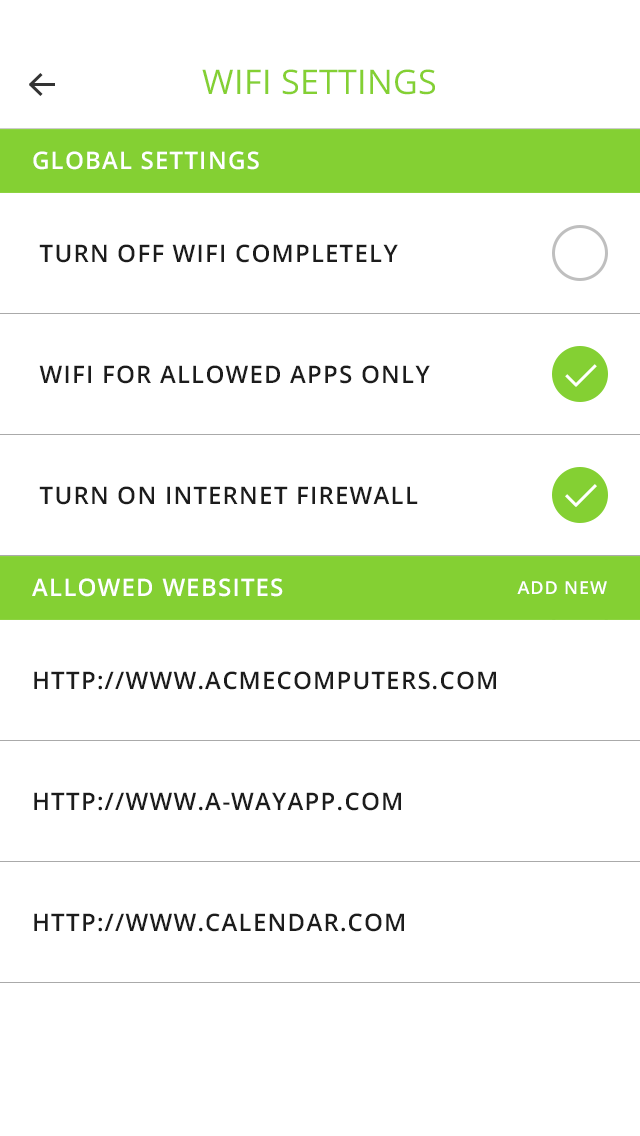
<style>
.page{position:relative;width:640px;height:1136px;background:#ffffff}
.page>*{position:absolute;margin:0}
.t1{font:34px "OpenSans";letter-spacing:0.01em;color:#84d033;text-transform:uppercase}
.t2{font:24px "OpenSans-Semibold";letter-spacing:0.05em;color:#ffffff;text-transform:uppercase}
.t3{font:24px "OpenSans-Semibold";letter-spacing:0.05em;color:#1c1c1c;text-transform:uppercase}
.t4{font:18px "OpenSans-Semibold";letter-spacing:0.05em;color:#ffffff;text-transform:uppercase}
</style>
<div class="page">
<p class="t1" style="left:202px;top:69px;width:233px;height:26px">WIFI SETTINGS</p>
<p class="t2" style="left:33px;top:151px;width:226px;height:19px">GLOBAL SETTINGS</p>
<p class="t3" style="left:39px;top:244px;width:359px;height:19px">TURN OFF WIFI COMPLETELY</p>
<p class="t3" style="left:39px;top:365px;width:391px;height:19px">WIFI FOR ALLOWED APPS ONLY</p>
<p class="t3" style="left:39px;top:486px;width:379px;height:19px">TURN ON INTERNET FIREWALL</p>
<p class="t2" style="left:32px;top:578px;width:251px;height:19px">ALLOWED WEBSITES</p>
<p class="t4" style="left:517px;top:581px;width:90px;height:13px">ADD NEW</p>
<p class="t3" style="left:34px;top:671px;width:462px;height:19px">http://www.acmecomputers.com</p>
<p class="t3" style="left:34px;top:792px;width:367px;height:19px">http://www.a-wayapp.com</p>
<p class="t3" style="left:34px;top:913px;width:370px;height:19px">http://www.CALENDAR.com</p>
<p class="t3" style="left:34px;top:913px;width:370px;height:19px">http://www.CALENDAR.com</p>
</div>
